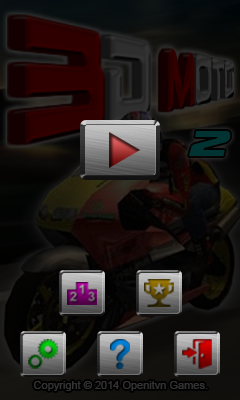
<style>
.page{position:relative;width:240px;height:400px}
.page>*{position:absolute;margin:0}
.t1{font:36px "DreamMMA";color:#003331}
.t2{font:11px "ArialMT";color:#333333}
</style>
<div class="page">
<p class="t1" style="left:189px;top:131px;width:42px;height:25px">2</p>
<p class="t2" style="left:34px;top:381px;width:174px;height:10px">Copyright © 2014 Openitvn Games.</p>
</div>
